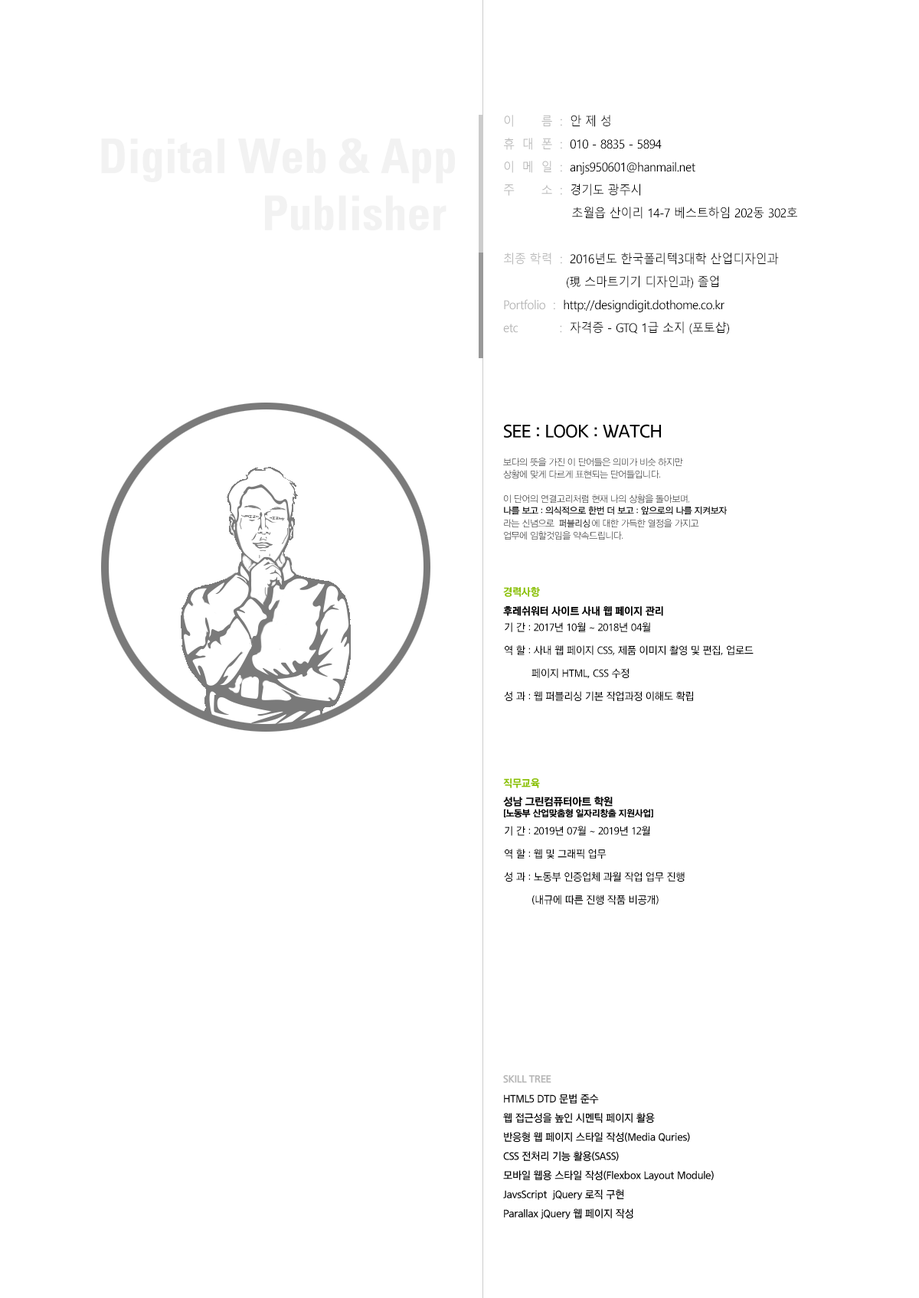
<style>
.page{position:relative;width:919px;height:1298px;background:#ffffff}
.page>*{position:absolute;margin:0}
.t1{font:12.2px/23px "MalgunGothic";letter-spacing:-0.025em;color:#000000;scale:0.95 1}
.t2{font:12.2px/23px "MalgunGothic";letter-spacing:-0.025em;color:#b6b6b6;scale:0.95 1}
.t3{font:47.5px "Univeconbol";color:#f2f2f2}
.t4{font:9.2px "THELuxGoM_U";letter-spacing:-0.025em;color:#000000;scale:0.95 1}
.t5{font:10.7px/23px "THELuxGoM_U";letter-spacing:-0.025em;color:#000000;scale:0.95 1}
.t6{font:10.7px/21.4px "THELuxGoM_U";letter-spacing:-0.025em;color:#000000;scale:0.95 1}
.t7{font:10.7px/19.1px "THELuxGoM_U";letter-spacing:-0.025em;color:#000000;scale:0.95 1}
.t8{font:10.7px/19.1px "THELuxGoEB";letter-spacing:-0.025em;color:#b7b7b7;scale:0.95 1}
</style>
<div class="page">
<p class="t1" style="left:503px;top:115px;width:294px;height:219px"><span class="t2">이       름  :</span>  안 제 성<br><span class="t2">휴  대  폰  :</span>  010 - 8835 - 5894<br><span class="t2">이  메  일  :</span>  anjs950601@hanmail.net<br><span class="t2">주       소  :</span>  경기도 광주시<br>                  초월읍 산이리 14-7 베스트하임 202동 302호<br><br><span class="t2">최종 학력  :</span>  2016년도 한국폴리텍3대학 산업디자인과<br>    (現 스마트기기 디자인과) 졸업<br><span class="t2">Portfolio  :</span>  http://designdigit.dothome.co.kr<br><span class="t2">etc           :</span>  자격증 - GTQ 1급 소지 (포토샵)</p>
<p class="t3" style="left:101px;top:138px;width:354px;height:92px;text-align:right">Digital Web &amp; App<br>Publisher</p>
<p class="t4" style="left:559px;top:519px;width:30px;height:9px">퍼블리싱</p>
<p class="t5" style="left:504px;top:622px;width:249px;height:284px">기 간 : 2017년 10월 ~ 2018년 04월<br>역 할 : 사내 웹 페이지 CSS, 제품 이미지 촬영 및 편집, 업로드<br> 페이지 HTML, CSS 수정<br>성 과 : 웹 퍼블리싱 기본 작업과정 이해도 확립<br><br><br><br><br><span class="t6"><br>기 간 : 2019년 07월 ~ 2019년 12월<br></span>역 할 : 웹 및 그래픽 업무<br>성 과 : 노동부 인증업체 과월 작업 업무 진행<br> (내규에 따른 진행 작품 비공개)</p>
<p class="t7" style="left:503px;top:1075px;width:210px;height:144px"><span class="t8"><br><br><br><br><br><br><br><br><br><br><br>SKILL TREE<br></span>HTML5 DTD 문법 준수<br>웹 접근성을 높인 시멘틱 페이지 활용<br>반응형 웹 페이지 스타일 작성(Media Quries)<br>CSS 전처리 기능 활용(SASS)<br>모바일 웹용 스타일 작성(Flexbox Layout Module)<br>JavsScript  jQuery 로직 구현<br>Parallax jQuery 웹 페이지 작성</p>
</div>
